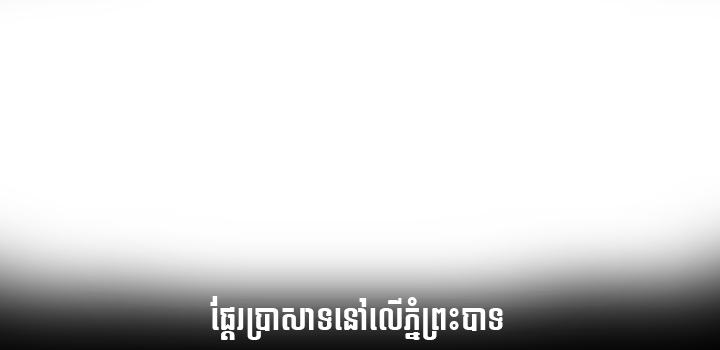
<style>
.page{position:relative;width:720px;height:350px;background:#ffffff}
.page>*{position:absolute;margin:0}
.t1{font:30px "Bayon";letter-spacing:-0.075em;color:#ffffff}
</style>
<div class="page">
<p class="t1" style="left:210px;top:296px;width:293px;height:44px">ផ្តែរប្រាសាទនៅលើភ្នំព្រះបាទ</p>
</div>
